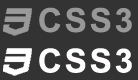
<style>
.page{position:relative;width:138px;height:80px;background:#333333}
.page>*{position:absolute;margin:0}
.t1{font:33.1px "Arial-BoldMT";letter-spacing:0.085em;color:#999898}
.t2{font:33.1px "Arial-BoldMT";letter-spacing:0.085em;color:#fefcfc}
</style>
<div class="page">
<p class="t1" style="left:39px;top:7px;width:93px;height:26px">CSS3</p>
<p class="t2" style="left:39px;top:48px;width:93px;height:25px">CSS3</p>
</div>
